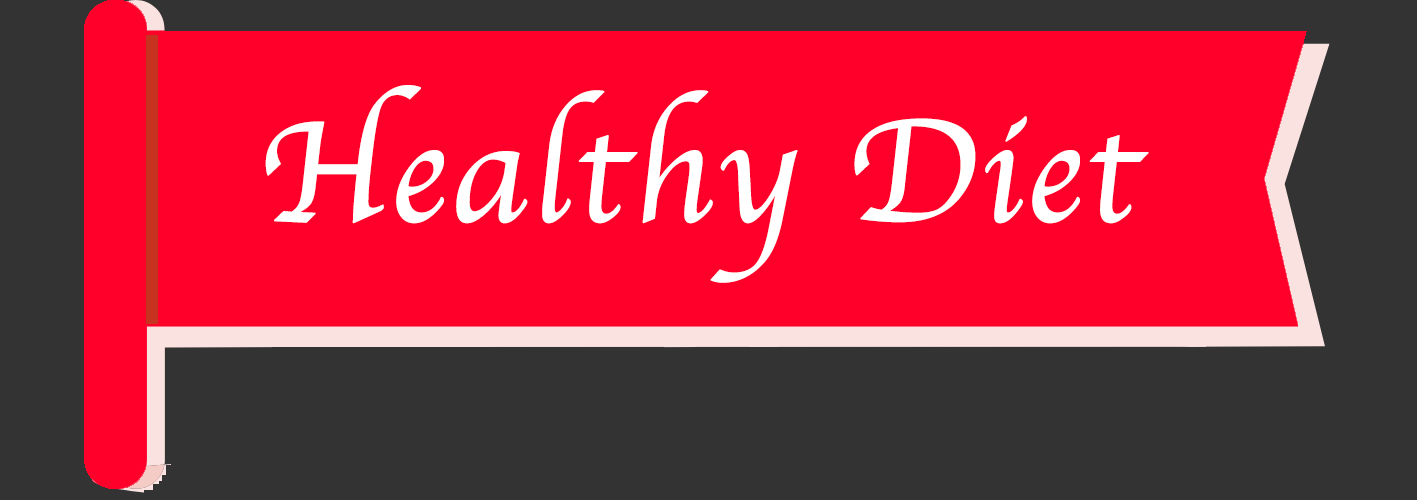
<style>
.page{position:relative;width:1417px;height:500px;background:#ff002b}
.page>*{position:absolute;margin:0}
.t1{font:150px "Apple-Chancery";color:#ffffff;font-weight:bold}
</style>
<div class="page">
<p class="t1" style="left:265px;top:85px;width:884px;height:198px">Healthy Diet</p>
</div>
